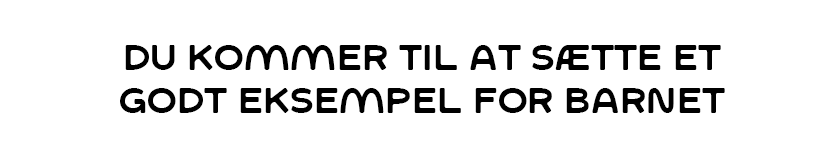
<style>
.page{position:relative;width:813px;height:163px;background:#ffffff}
.page>*{position:absolute;margin:0}
.t1{font:35.4px "SFCWosterSans-Regular";color:#000000}
</style>
<div class="page">
<p class="t1" style="left:120px;top:45px;width:605px;height:68px;text-align:center">du kommer til at sætte et godt eksempel for barnet</p>
</div>
